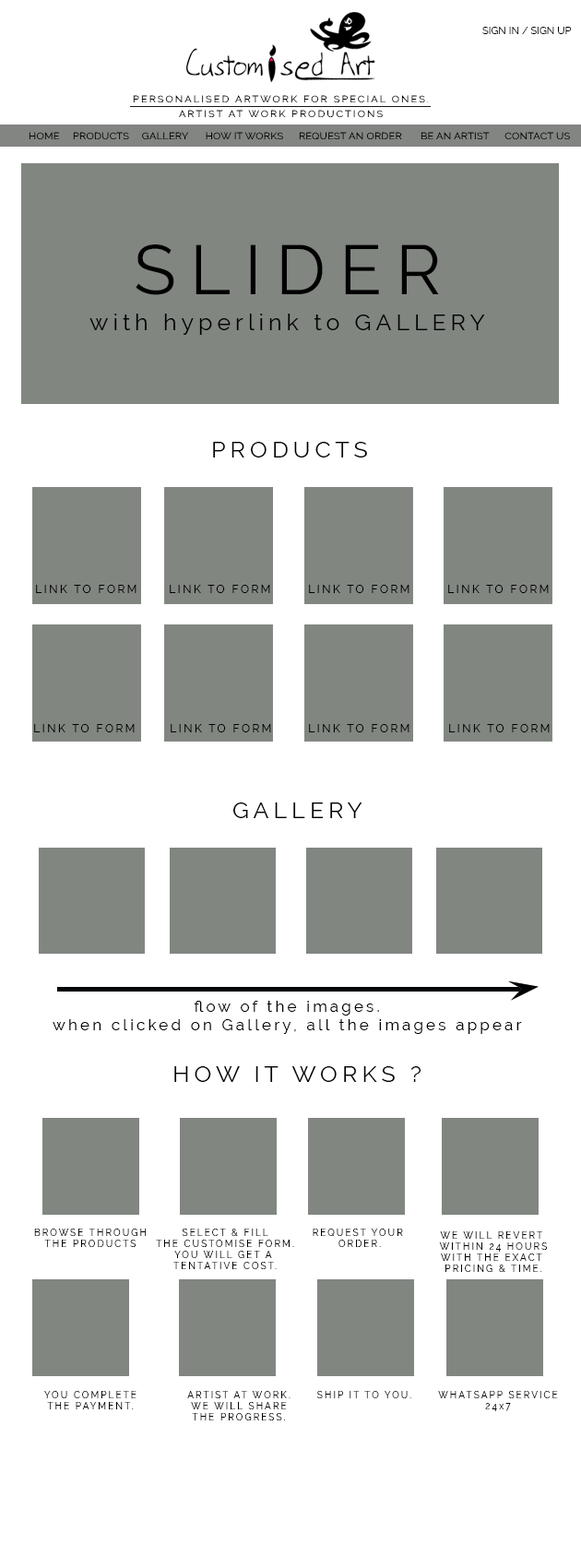
<style>
.page{position:relative;width:581px;height:1568px;background:#ffffff}
.page>*{position:absolute;margin:0}
.t1{font:10.3px "Raleway-Regular";letter-spacing:0.01em;color:#000000}
.t2{font:9.4px "Raleway-Regular";letter-spacing:0.2em;color:#000000;scale:1.06 1}
.t3{font:9.5px "Raleway-Regular";letter-spacing:0.01em;color:#000000;scale:1.09 1}
.t4{font:69.7px "Raleway-Regular";letter-spacing:0.2em;color:#000000}
.t5{font:23.1px "Raleway-Regular";letter-spacing:0.2em;color:#000000}
.t6{font:11.2px "Raleway-Regular";letter-spacing:0.2em;color:#000000}
.t7{font:15.4px "Raleway-Regular";letter-spacing:0.2em;color:#000305}
.t8{font:9.3px "Raleway-Regular";letter-spacing:0.2em;color:#000000}
</style>
<div class="page">
<p class="t1" style="left:482px;top:27px;width:90px;height:7px">SIGN IN / SIGN UP</p>
<p class="t2" style="left:133px;top:95px;width:296px;height:7px">PERSONALISED ARTWORK FOR SPECIAL ONES.</p>
<p class="t2" style="left:179px;top:110px;width:204px;height:7px">ARTIST AT WORK PRODUCTIONS</p>
<p class="t3" style="left:29px;top:132px;width:31px;height:7px">HOME</p>
<p class="t3" style="left:73px;top:132px;width:56px;height:7px">PRODUCTS</p>
<p class="t3" style="left:142px;top:132px;width:47px;height:7px">GALLERY</p>
<p class="t3" style="left:206px;top:132px;width:77px;height:7px">HOW IT WORKS</p>
<p class="t3" style="left:299px;top:132px;width:103px;height:7px">REQUEST AN ORDER</p>
<p class="t3" style="left:421px;top:132px;width:69px;height:7px">BE AN ARTIST</p>
<p class="t3" style="left:505px;top:132px;width:65px;height:7px">CONTACT US</p>
<p class="t4" style="left:136px;top:244px;width:303px;height:51px">SLIDER</p>
<p class="t5" style="left:89px;top:314px;width:396px;height:21px">with hyperlink to GALLERY</p>
<p class="t5" style="left:213px;top:442px;width:154px;height:15px">PRODUCTS</p>
<p class="t6" style="left:36px;top:585px;width:101px;height:8px">LINK TO FORM</p>
<p class="t6" style="left:170px;top:585px;width:100px;height:8px">LINK TO FORM</p>
<p class="t6" style="left:309px;top:585px;width:101px;height:8px">LINK TO FORM</p>
<p class="t6" style="left:448px;top:585px;width:101px;height:8px">LINK TO FORM</p>
<p class="t6" style="left:34px;top:724px;width:101px;height:8px">LINK TO FORM</p>
<p class="t6" style="left:171px;top:724px;width:100px;height:8px">LINK TO FORM</p>
<p class="t6" style="left:309px;top:724px;width:101px;height:8px">LINK TO FORM</p>
<p class="t6" style="left:449px;top:724px;width:101px;height:8px">LINK TO FORM</p>
<p class="t5" style="left:232px;top:802px;width:130px;height:16px">GALLERY</p>
<p class="t7" style="left:53px;top:1001px;width:469px;height:33px;text-align:center">flow of the images.<br>when clicked on Gallery, all the images appear</p>
<p class="t5" style="left:174px;top:1066px;width:248px;height:16px">HOW IT WORKS ?</p>
<p class="t8" style="left:34px;top:1229px;width:113px;height:18px;text-align:center">BROWSE THROUGH<br>THE PRODUCTS</p>
<p class="t8" style="left:156px;top:1229px;width:138px;height:40px;text-align:center">SELECT &amp; FILL<br>THE CUSTOMISE FORM.<br>YOU WILL GET A <br>TENTATIVE COST.</p>
<p class="t8" style="left:313px;top:1229px;width:90px;height:18px;text-align:center">REQUEST YOUR <br>ORDER.</p>
<p class="t8" style="left:439px;top:1231px;width:109px;height:41px;text-align:center">WE WILL REVERT <br>WITHIN 24 HOURS<br>WITH THE EXACT <br>PRICING &amp; TIME.</p>
<p class="t8" style="left:44px;top:1391px;width:93px;height:18px;text-align:center">YOU COMPLETE<br>THE PAYMENT.</p>
<p class="t8" style="left:187px;top:1391px;width:104px;height:29px;text-align:center">ARTIST AT WORK.<br>WE WILL SHARE<br>THE PROGRESS.</p>
<p class="t8" style="left:316px;top:1391px;width:95px;height:7px">SHIP IT TO YOU.</p>
<p class="t8" style="left:438px;top:1391px;width:120px;height:20px;text-align:center">WHATSAPP SERVICE<br>24x7</p>
</div>
